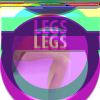
<style>
.page{position:relative;width:100px;height:100px}
.page>*{position:absolute;margin:0}
.t1{font:20.8px "MyriadPro-BoldCond"}
</style>
<div class="page">
<p class="t1" style="left:34px;top:19px;width:33px;height:14px">LEGS</p>
</div>
